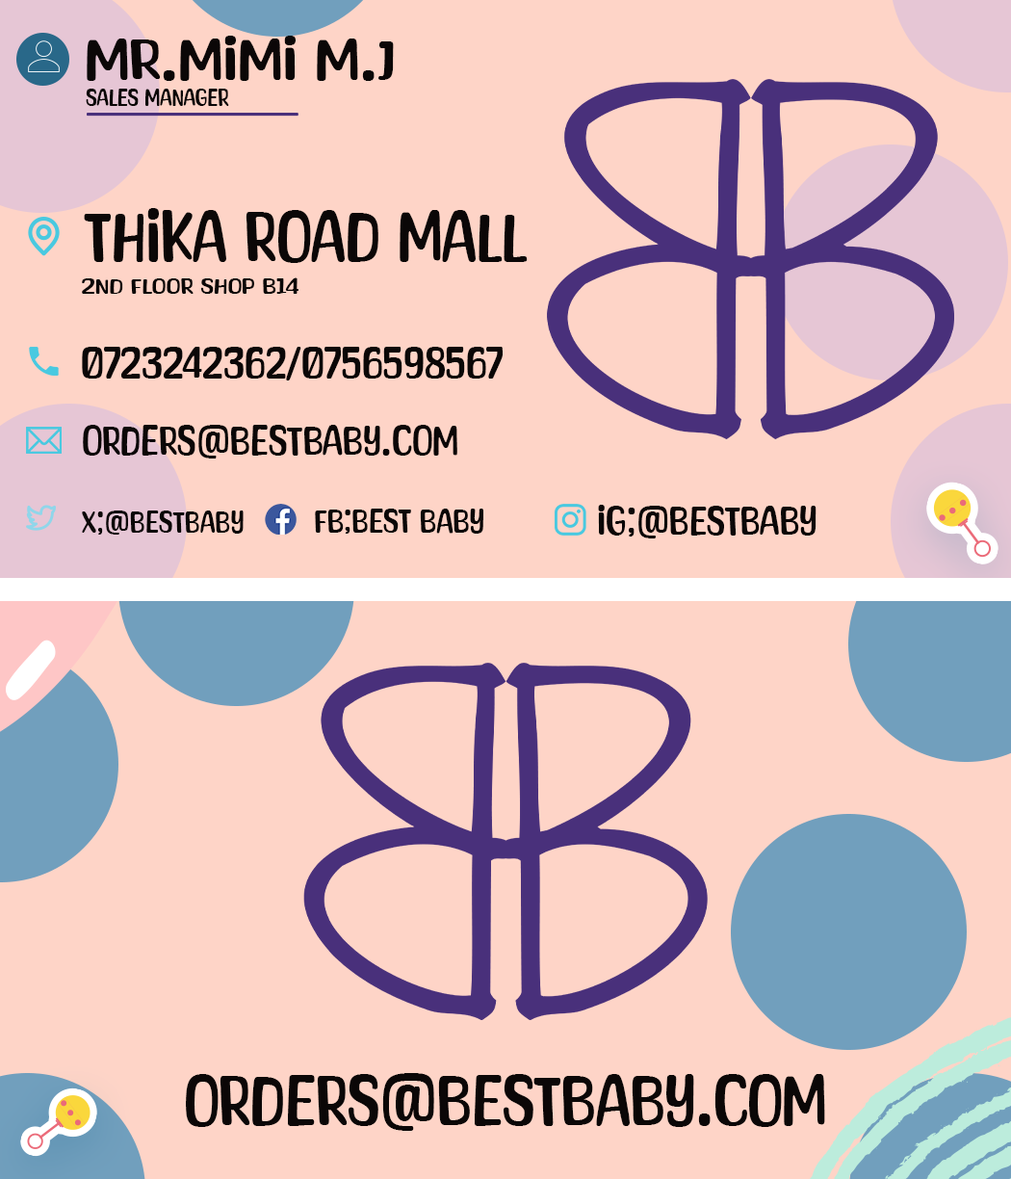
<style>
.page{position:relative;width:1011px;height:1179px;background:#fed4c7}
.page>*{position:absolute;margin:0}
.t1{font:53.2px "AmberyGarden-Regular";color:#0b0707;text-transform:uppercase;scale:1.21 1}
.t2{font:22.2px "AmberyGarden-Regular";color:#0b0707;text-transform:uppercase}
.t3{font:64.2px "AmberyGarden-Regular";color:#0b0707;text-transform:uppercase}
.t4{font:19.3px "AmberyGarden-Regular";color:#0b0707;text-transform:uppercase;scale:1.37 1}
.t5{font:39.8px "AmberyGarden-Regular";color:#0b0707;text-transform:uppercase}
.t6{font:37.6px "AmberyGarden-Regular";color:#0b0707;text-transform:uppercase}
.t7{font:30.8px "AmberyGarden-Regular";color:#0b0707;text-transform:uppercase}
.t8{font:36.6px "AmberyGarden-Regular";color:#0b0707;text-transform:uppercase}
.t9{font:28.3px "AmberyGarden-Regular";color:#0b0707;text-transform:uppercase}
</style>
<div class="page">
<p class="t1" style="left:87px;top:36px;width:307px;height:45px">Mr.mimi m.j</p>
<p class="t2" style="left:86px;top:89px;width:143px;height:17px">sales manager</p>
<p class="t3" style="left:84px;top:208px;width:444px;height:55px">thika road mall</p>
<p class="t4" style="left:82px;top:277px;width:217px;height:17px">2nd floor shop b14</p>
<p class="t5" style="left:82px;top:347px;width:421px;height:33px">0723242362/0756598567</p>
<p class="t6" style="left:83px;top:425px;width:375px;height:33px">orders@bestbaby.com</p>
<p class="t7" style="left:315px;top:509px;width:169px;height:25px">fb;best baby</p>
<p class="t8" style="left:598px;top:505px;width:219px;height:33px">ig;@bestbaby</p>
<p class="t9" style="left:82px;top:511px;width:162px;height:24px">x;@bestbaby</p>
<p class="t3" style="left:186px;top:1073px;width:639px;height:58px">orders@bestbaby.com</p>
</div>
